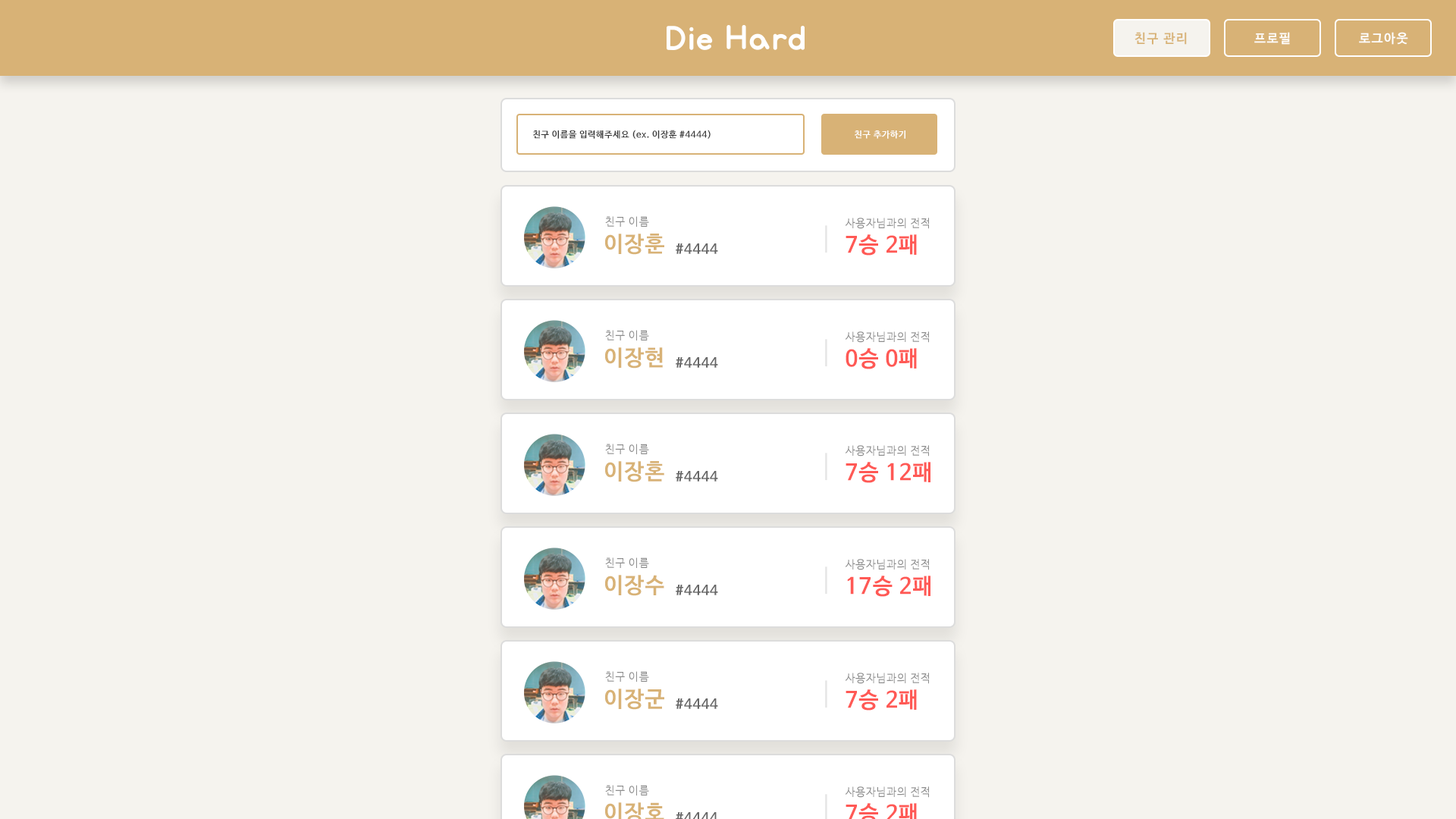
<style>
.page{position:relative;width:1456px;height:819px;background:#f5f3ee}
.page>*{position:absolute;margin:0}
.t1{font:12.6px "NanumBarunGothicBold";letter-spacing:0.1em;color:#d8b276}
.t2{font:12.6px "NanumBarunGothicBold";letter-spacing:0.1em;color:#ffffff}
.t3{font:12.6px "NanumBarunGothicBold";letter-spacing:0.1em;color:#fefefe}
.t4{font:8.8px "NanumBarunGothicBold";letter-spacing:0.05em;color:#383838}
.t5{font:8.8px "NanumBarunGothicBold";letter-spacing:0.05em;color:#ffffff}
.t6{font:11.1px "NanumBarunGothic";letter-spacing:0.05em;color:#8d8d8d}
.t7{font:22px "NanumBarunGothicBold";letter-spacing:0.05em;color:#d8b276}
.t8{font:13.7px "NanumBarunGothicBold";letter-spacing:0.05em;color:#676767}
.t9{font:22px "NanumBarunGothicBold";letter-spacing:0.05em;color:#ff5955}
</style>
<div class="page">
<p class="t1" style="left:1134px;top:32px;width:53px;height:13px">친구 관리</p>
<p class="t2" style="left:1254px;top:32px;width:36px;height:13px">프로필</p>
<p class="t3" style="left:1359px;top:32px;width:49px;height:13px">로그아웃</p>
<p class="t4" style="left:533px;top:130px;width:178px;height:9px">친구 이름을 입력해주세요 (ex. 이장훈 #4444)</p>
<p class="t5" style="left:855px;top:130px;width:50px;height:9px">친구 추가하기</p>
<p class="t6" style="left:605px;top:216px;width:44px;height:11px">친구 이름</p>
<p class="t6" style="left:845px;top:218px;width:84px;height:11px">사용자님과의 전적</p>
<p class="t7" style="left:605px;top:234px;width:59px;height:21px">이장훈</p>
<p class="t8" style="left:676px;top:243px;width:42px;height:11px">#4444</p>
<p class="t9" style="left:846px;top:234px;width:71px;height:22px">7승 2패</p>
<p class="t6" style="left:605px;top:330px;width:44px;height:10px">친구 이름</p>
<p class="t6" style="left:845px;top:331px;width:84px;height:12px">사용자님과의 전적</p>
<p class="t7" style="left:605px;top:347px;width:58px;height:22px">이장현</p>
<p class="t9" style="left:846px;top:348px;width:71px;height:21px">0승 0패</p>
<p class="t8" style="left:676px;top:357px;width:42px;height:11px">#4444</p>
<p class="t6" style="left:605px;top:444px;width:44px;height:10px">친구 이름</p>
<p class="t6" style="left:845px;top:445px;width:84px;height:12px">사용자님과의 전적</p>
<p class="t7" style="left:605px;top:461px;width:59px;height:21px">이장혼</p>
<p class="t9" style="left:846px;top:462px;width:84px;height:21px">7승 12패</p>
<p class="t8" style="left:676px;top:471px;width:42px;height:11px">#4444</p>
<p class="t6" style="left:605px;top:557px;width:44px;height:11px">친구 이름</p>
<p class="t6" style="left:845px;top:559px;width:84px;height:11px">사용자님과의 전적</p>
<p class="t7" style="left:605px;top:575px;width:59px;height:21px">이장수</p>
<p class="t9" style="left:847px;top:576px;width:83px;height:21px">17승 2패</p>
<p class="t8" style="left:676px;top:585px;width:42px;height:10px">#4444</p>
<p class="t6" style="left:605px;top:671px;width:44px;height:11px">친구 이름</p>
<p class="t6" style="left:845px;top:673px;width:84px;height:11px">사용자님과의 전적</p>
<p class="t7" style="left:605px;top:689px;width:59px;height:21px">이장군</p>
<p class="t9" style="left:846px;top:689px;width:71px;height:22px">7승 2패</p>
<p class="t8" style="left:676px;top:698px;width:42px;height:11px">#4444</p>
<p class="t6" style="left:605px;top:785px;width:44px;height:10px">친구 이름</p>
<p class="t6" style="left:845px;top:786px;width:84px;height:12px">사용자님과의 전적</p>
</div>
